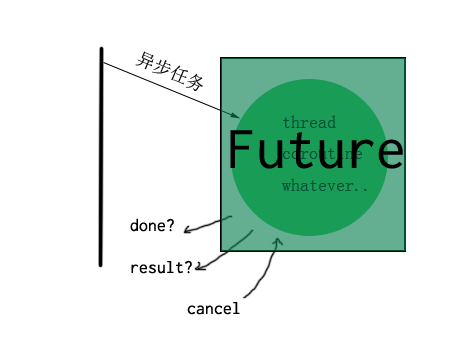
<style>
.page{position:relative;width:454px;height:340px;background:#ffffff}
.page>*{position:absolute;margin:0}
.t1{font:18px "SimSun";color:#000000}
.t2{font:18px "SimSun";color:#065033}
.t3{font:60px "Inconsolata";color:#000000}
.t4{font:18px "Inconsolata";color:#000000}
</style>
<div class="page">
<p class="t1" style="left:135px;top:51px;width:68px;height:41px;rotate:23deg">异步任务</p>
<p class="t2" style="left:281px;top:115px;width:86px;height:76px">thread<br>coroutine<br>whatever..</p>
<p class="t3" style="left:230px;top:130px;width:173px;height:39px">Future</p>
<p class="t4" style="left:130px;top:218px;width:44px;height:14px">done?</p>
<p class="t4" style="left:131px;top:260px;width:61px;height:14px">result?</p>
<p class="t4" style="left:187px;top:302px;width:53px;height:13px">cancel</p>
</div>
